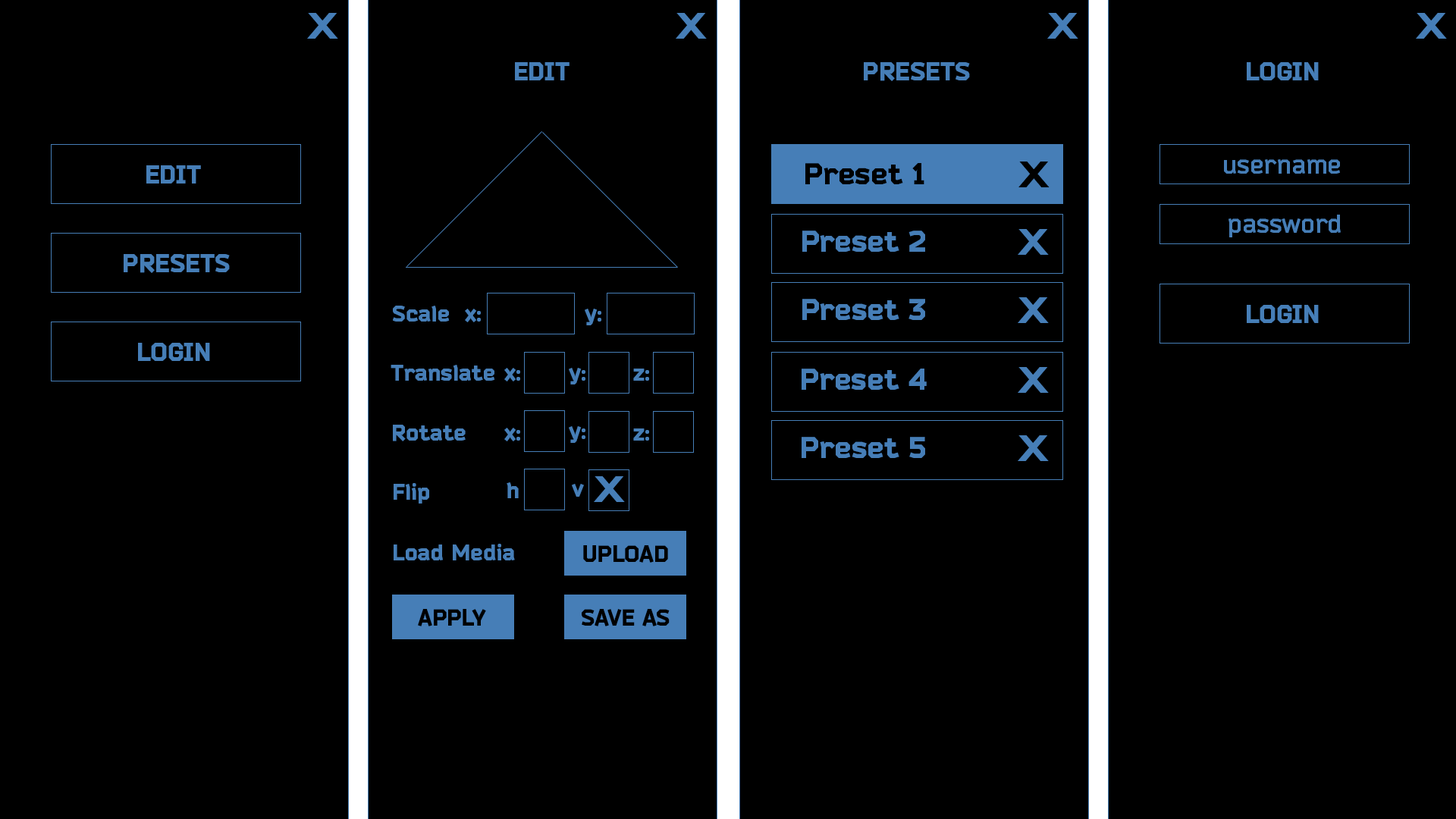
<style>
.page{position:relative;width:1456px;height:819px;background:#000000}
.page>*{position:absolute;margin:0}
.t1{font:35.5px "Arial-BoldMT";color:#467eb7;scale:1.3 1}
.t2{font:25.8px "Bender-Black";color:#467eb7}
.t3{font:35.5px "Arial-BoldMT";color:#010101;scale:1.3 1}
.t4{font:25.8px "Bender-Bold";color:#467eb7}
.t5{font:29.5px "Bender-Black";color:#000000}
.t6{font:29.5px "Bender-Black";color:#467eb7}
.t7{font:22.3px "Bender-Black";color:#467eb7}
.t8{font:23.1px "Bender-Black";color:#000000}
</style>
<div class="page">
<p class="t1" style="left:307px;top:13px;width:31px;height:26px">X</p>
<p class="t1" style="left:676px;top:13px;width:31px;height:26px">X</p>
<p class="t1" style="left:1047px;top:13px;width:31px;height:26px">X</p>
<p class="t1" style="left:1416px;top:13px;width:31px;height:26px">X</p>
<p class="t2" style="left:515px;top:62px;width:55px;height:18px">EDIT</p>
<p class="t2" style="left:864px;top:62px;width:106px;height:19px">PRESETS</p>
<p class="t2" style="left:1247px;top:62px;width:72px;height:18px">LOGIN</p>
<p class="t3" style="left:1018px;top:162px;width:32px;height:25px">X</p>
<p class="t4" style="left:1224px;top:159px;width:116px;height:15px">username</p>
<p class="t2" style="left:146px;top:165px;width:55px;height:19px">EDIT</p>
<p class="t5" style="left:805px;top:163px;width:119px;height:21px">Preset 1</p>
<p class="t4" style="left:1228px;top:215px;width:113px;height:22px">password</p>
<p class="t6" style="left:802px;top:231px;width:123px;height:21px">Preset 2</p>
<p class="t1" style="left:1018px;top:229px;width:31px;height:26px">X</p>
<p class="t2" style="left:124px;top:254px;width:106px;height:19px">PRESETS</p>
<p class="t7" style="left:393px;top:306px;width:57px;height:16px">Scale</p>
<p class="t6" style="left:802px;top:299px;width:123px;height:21px">Preset 3</p>
<p class="t1" style="left:1018px;top:297px;width:31px;height:26px">X</p>
<p class="t2" style="left:1247px;top:305px;width:72px;height:18px">LOGIN</p>
<p class="t7" style="left:465px;top:309px;width:16px;height:13px">x:</p>
<p class="t7" style="left:585px;top:309px;width:16px;height:16px">y:</p>
<p class="t2" style="left:138px;top:343px;width:72px;height:18px">LOGIN</p>
<p class="t7" style="left:391px;top:365px;width:104px;height:16px">Translate</p>
<p class="t7" style="left:504px;top:368px;width:16px;height:13px">x:</p>
<p class="t7" style="left:569px;top:368px;width:16px;height:16px">y:</p>
<p class="t7" style="left:633px;top:369px;width:16px;height:12px">z:</p>
<p class="t6" style="left:802px;top:369px;width:125px;height:21px">Preset 4</p>
<p class="t1" style="left:1018px;top:367px;width:31px;height:26px">X</p>
<p class="t7" style="left:393px;top:425px;width:73px;height:16px">Rotate</p>
<p class="t7" style="left:504px;top:428px;width:16px;height:13px">x:</p>
<p class="t7" style="left:569px;top:426px;width:16px;height:17px">y:</p>
<p class="t7" style="left:633px;top:428px;width:16px;height:13px">z:</p>
<p class="t6" style="left:802px;top:437px;width:123px;height:21px">Preset 5</p>
<p class="t1" style="left:1018px;top:435px;width:31px;height:26px">X</p>
<p class="t7" style="left:394px;top:483px;width:35px;height:21px">Flip</p>
<p class="t7" style="left:507px;top:482px;width:12px;height:16px">h</p>
<p class="t7" style="left:572px;top:484px;width:12px;height:13px">v</p>
<p class="t1" style="left:594px;top:476px;width:31px;height:26px">X</p>
<p class="t7" style="left:394px;top:544px;width:121px;height:16px">Load Media</p>
<p class="t8" style="left:583px;top:545px;width:85px;height:18px">UPLOAD</p>
<p class="t8" style="left:418px;top:609px;width:68px;height:17px">APPLY</p>
<p class="t8" style="left:582px;top:609px;width:88px;height:17px">SAVE AS</p>
</div>
